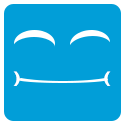
<style>
.page{position:relative;width:125px;height:125px;background:#019ed8}
.page>*{position:absolute;margin:0}
.t1{font:16px "HelveticaNeue-CondensedBold";color:#ffffff;scale:1.5 1}
</style>
<div class="page">
<p class="t1" style="left:13px;top:71px;width:98px;height:15px">)     (</p>
</div>
